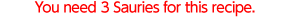
<style>
.page{position:relative;width:290px;height:17px;background:#ffffff}
.page>*{position:absolute;margin:0}
.t1{font:14px "UDShinGoPro-Medium";letter-spacing:-0.04em;color:#ff0000}
</style>
<div class="page">
<p class="t1" style="left:34px;top:0px;width:221px;height:17px">You need 3 Sauries for this recipe.</p>
</div>
